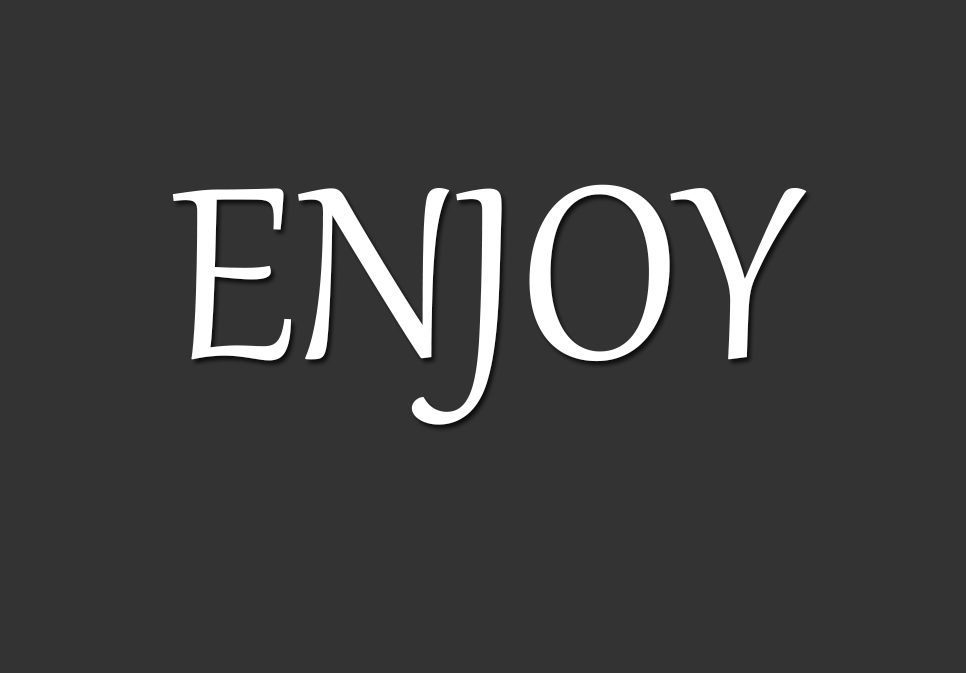
<style>
.page{position:relative;width:966px;height:673px;background:#333333}
.page>*{position:absolute;margin:0}
.t1{font:300px "Gabriola";color:#ffffff}
</style>
<div class="page">
<p class="t1" style="left:172px;top:184px;width:635px;height:241px">ENJOY</p>
</div>
